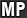
<style>
.page{position:relative;width:27px;height:18px;background:#ffffff}
.page>*{position:absolute;margin:0}
.t1{font:18px "Swiss721BT-BlackCondensed";color:#ffffff}
</style>
<div class="page">
<p class="t1" style="left:2px;top:2px;width:23px;height:14px">MP</p>
</div>
